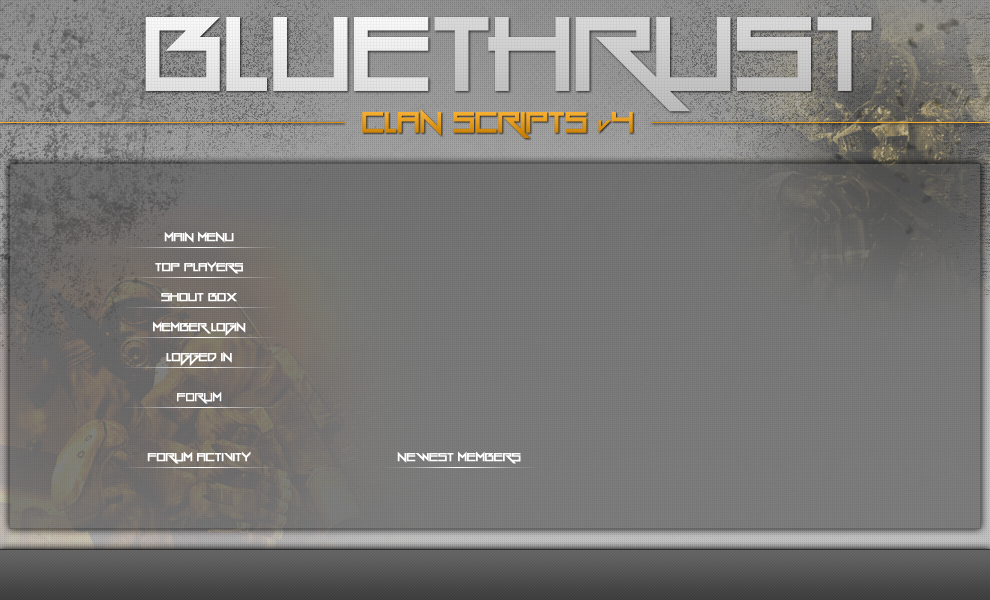
<style>
.page{position:relative;width:990px;height:600px}
.page>*{position:absolute;margin:0}
.t1{font:215px "Gang-Wolfik";color:#dadada}
.t2{font:215px "Gang-Wolfik";color:#ffffff}
.t3{font:60px "Gang-Wolfik";color:#e69f22}
.t4{font:36px "Gang-Wolfik";color:#e69f22}
.t5{font:24px "Gang-Wolfik";color:#ffffff}
</style>
<div class="page">
<p class="t1" style="left:145px;top:17px;width:727px;height:95px"><span class="t2">BLUE</span>THRUST</p>
<p class="t3" style="left:362px;top:109px;width:271px;height:30px">CLAN SCRIPTS <span class="t4">v</span>4</p>
<p class="t5" style="left:164px;top:231px;width:70px;height:12px">Main Menu</p>
<p class="t5" style="left:155px;top:261px;width:88px;height:13px">Top Players</p>
<p class="t5" style="left:161px;top:293px;width:76px;height:9px">Shout Box</p>
<p class="t5" style="left:153px;top:321px;width:93px;height:15px">Member Login</p>
<p class="t5" style="left:166px;top:351px;width:66px;height:15px">Logged In</p>
<p class="t5" style="left:177px;top:391px;width:45px;height:13px">Forum</p>
<p class="t5" style="left:147px;top:451px;width:104px;height:13px">FORUM ACTIVITY</p>
<p class="t5" style="left:397px;top:451px;width:124px;height:13px">NEWEST MEMBERS</p>
</div>
